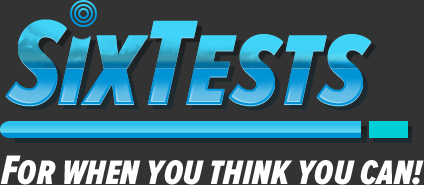
<style>
.page{position:relative;width:424px;height:185px;background:#333333}
.page>*{position:absolute;margin:0}
.t1{font:124.8px "ProximaNovaSExCn-ExtrabldIt"}
.t2{font:42.9px "ProximaNovaSExCn-ExtrabldIt";color:#ffffff}
</style>
<div class="page">
<p class="t1" style="left:10px;top:24px;width:367px;height:87px">SixTests</p>
<p class="t2" style="left:0px;top:155px;width:424px;height:30px">For when you think you can!</p>
</div>
